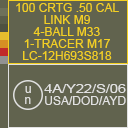
<style>
.page{position:relative;width:128px;height:128px;background:#61634e}
.page>*{position:absolute;margin:0}
.t1{font:12px/12px "ArialMT";color:#f3d022}
.t2{font:12px/12px "ArialMT";color:#e1e1e1;scale:1.21 1}
.t3{font:12px/12px "ArialMT";color:#e1e1e1}
</style>
<div class="page">
<p class="t1" style="left:16px;top:3px;width:103px;height:57px;text-align:center">100 CRTG .50 CAL<br>LINK M9<br>4-BALL M33<br>1-TRACER M17<br>LC-12H693S818</p>
<p class="t2" style="left:44px;top:84px;width:82px;height:21px">4A/Y22/S/06<br><span class="t3">USA/DOD/AYD</span></p>
</div>
